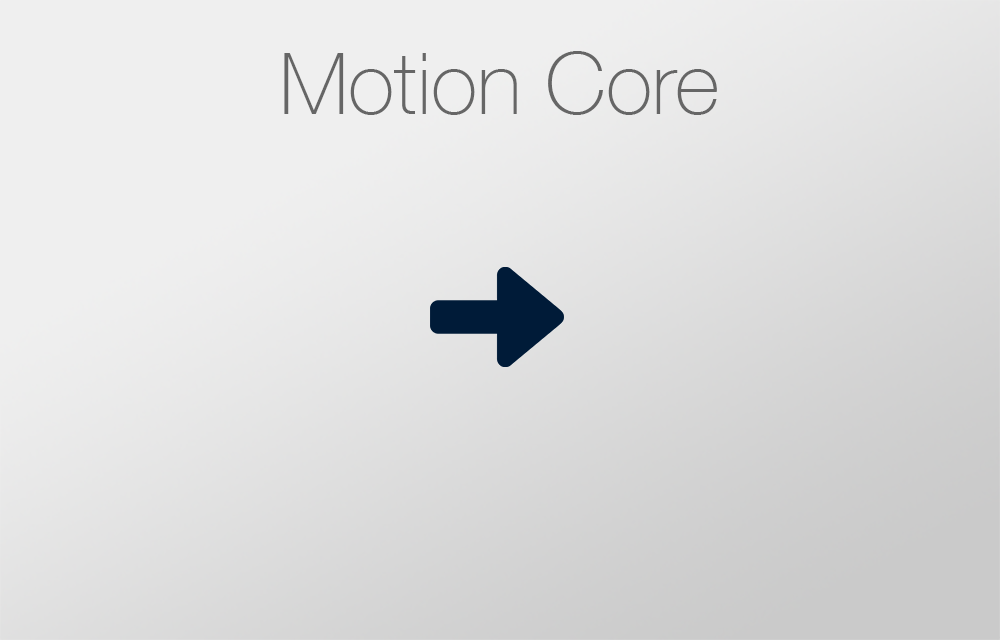
<style>
.page{position:relative;width:1000px;height:640px}
.page>*{position:absolute;margin:0}
.t1{font:85.7px "HelveticaNeue-Thin";color:#666666}
</style>
<div class="page">
<p class="t1" style="left:284px;top:51px;width:433px;height:64px">Motion Core</p>
</div>
